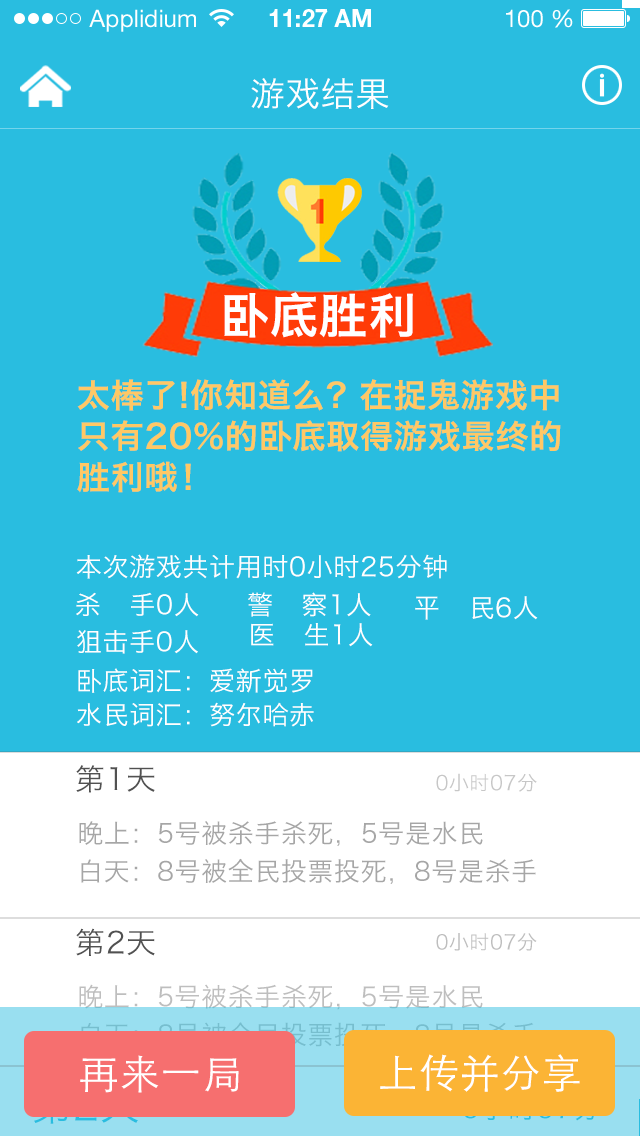
<style>
.page{position:relative;width:640px;height:1136px;background:#29bde0}
.page>*{position:absolute;margin:0}
.t1{font:34px "HiraginoSansGB-W3";letter-spacing:0.025em;color:#ffffff}
.t2{font:48.1px "HiraginoSansGB-W6";letter-spacing:0.025em;color:#ffffff}
.t3{font:33px/41px "HiraginoSansGB-W6";letter-spacing:0.025em;color:#ffc865}
.t4{font:26px "HiraginoSansGB-W3";letter-spacing:0.025em;color:#ffffff}
.t5{font:26px/34px "HiraginoSansGB-W3";letter-spacing:0.025em;color:#ffffff}
.t6{font:30px "HiraginoSansGB-W3";letter-spacing:0.025em;color:#515151}
.t7{font:20px "HiraginoSansGB-W3";letter-spacing:0.025em;color:#c7c7c7}
.t8{font:26px/19px "HiraginoSansGB-W3";letter-spacing:0.025em;color:#a6a6a6}
.t9{font:20px "HiraginoSansGB-W3";letter-spacing:0.025em;color:#bebebe}
.t10{font:40px "STHeitiSC-Light";letter-spacing:0.025em;color:#ffffff}
</style>
<div class="page">
<p class="t1" style="left:251px;top:78px;width:138px;height:31px">游戏结果</p>
<p class="t2" style="left:224px;top:292px;width:189px;height:46px">卧底胜利</p>
<p class="t3" style="left:77px;top:379px;width:484px;height:114px">太棒了!你知道么？在捉鬼游戏中<br>只有20%的卧底取得游戏最终的<br>胜利哦！</p>
<p class="t4" style="left:76px;top:554px;width:371px;height:25px">本次游戏共计用时0小时25分钟</p>
<p class="t4" style="left:76px;top:592px;width:295px;height:25px">杀   手0人     警   察1人</p>
<p class="t4" style="left:415px;top:596px;width:123px;height:24px">平   民6人</p>
<p class="t4" style="left:77px;top:629px;width:121px;height:25px">狙击手0人</p>
<p class="t4" style="left:251px;top:623px;width:122px;height:24px">医   生1人</p>
<p class="t5" style="left:77px;top:668px;width:237px;height:59px">卧底词汇：爱新觉罗<br>水民词汇：努尔哈赤</p>
<p class="t6" style="left:76px;top:765px;width:79px;height:28px">第1天</p>
<p class="t7" style="left:436px;top:773px;width:101px;height:19px">0小时07分</p>
<p class="t8" style="left:79px;top:821px;width:457px;height:63px">晚上：5号被杀手杀死，5号是水民<br> <br>白天：8号被全民投票投死，8号是杀手</p>
<p class="t6" style="left:76px;top:928px;width:79px;height:28px">第2天</p>
<p class="t9" style="left:436px;top:933px;width:101px;height:18px">0小时07分</p>
<p class="t10" style="left:80px;top:1055px;width:159px;height:38px">再来一局</p>
<p class="t10" style="left:380px;top:1054px;width:200px;height:38px">上传并分享</p>
</div>
